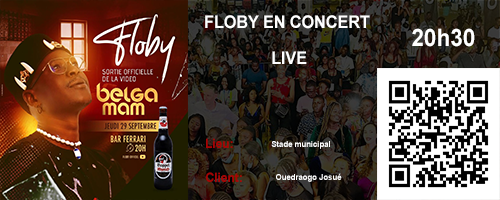
<style>
.page{position:relative;width:500px;height:200px}
.page>*{position:absolute;margin:0}
.t1{font:29.6px "Arial-BoldMT";color:#ffffff;scale:0.94 1}
.t2{font:41.3px "Arial-BoldMT";color:#ffffff;scale:0.94 1}
.t3{font:21.8px "Arial-BoldMT";color:#a60404;scale:0.94 1}
.t4{font:14.1px "Arial-BoldMT";color:#ffffff;scale:0.94 1}
</style>
<div class="page">
<p class="t1" style="left:205px;top:15px;width:165px;height:49px;text-align:center">FLOBY EN CONCERT<br> LIVE</p>
<p class="t2" style="left:412px;top:28px;width:63px;height:19px">20h30</p>
<p class="t3" style="left:206px;top:138px;width:27px;height:10px">Lieu:</p>
<p class="t4" style="left:271px;top:141px;width:59px;height:8px">Stade municipal</p>
<p class="t3" style="left:206px;top:172px;width:36px;height:10px">Client:</p>
<p class="t4" style="left:276px;top:173px;width:66px;height:9px">Ouedraogo Josué</p>
</div>
